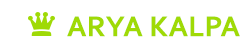
<style>
.page{position:relative;width:246px;height:52px;background:#ffffff}
.page>*{position:absolute;margin:0}
.t1{font:30px "Corbel-Bold";letter-spacing:0.005em;color:#9fda06}
</style>
<div class="page">
<p class="t1" style="left:67px;top:16px;width:173px;height:21px">ARYA KALPA</p>
</div>
